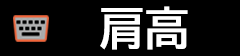
<style>
.page{position:relative;width:240px;height:56px;background:#000000}
.page>*{position:absolute;margin:0}
.t1{font:44.8px "BIZ-UDPGothic-Bold";color:#ffffff}
</style>
<div class="page">
<p class="t1" style="left:100px;top:6px;width:88px;height:44px">肩高</p>
</div>
